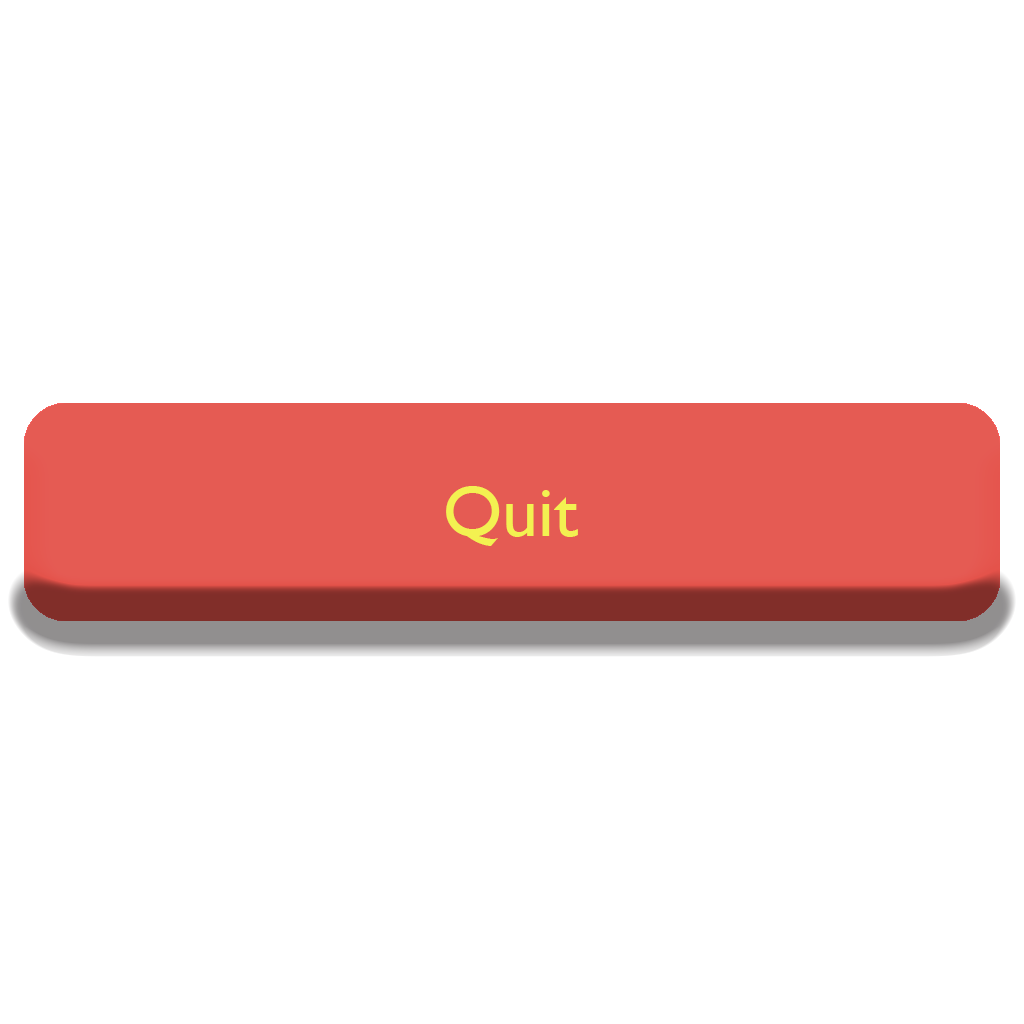
<style>
.page{position:relative;width:1024px;height:1024px;background:#ffffff}
.page>*{position:absolute;margin:0}
.t1{font:72px "GillSansMT";color:#f3f151}
</style>
<div class="page">
<p class="t1" style="left:446px;top:486px;width:132px;height:60px">Quit</p>
</div>
